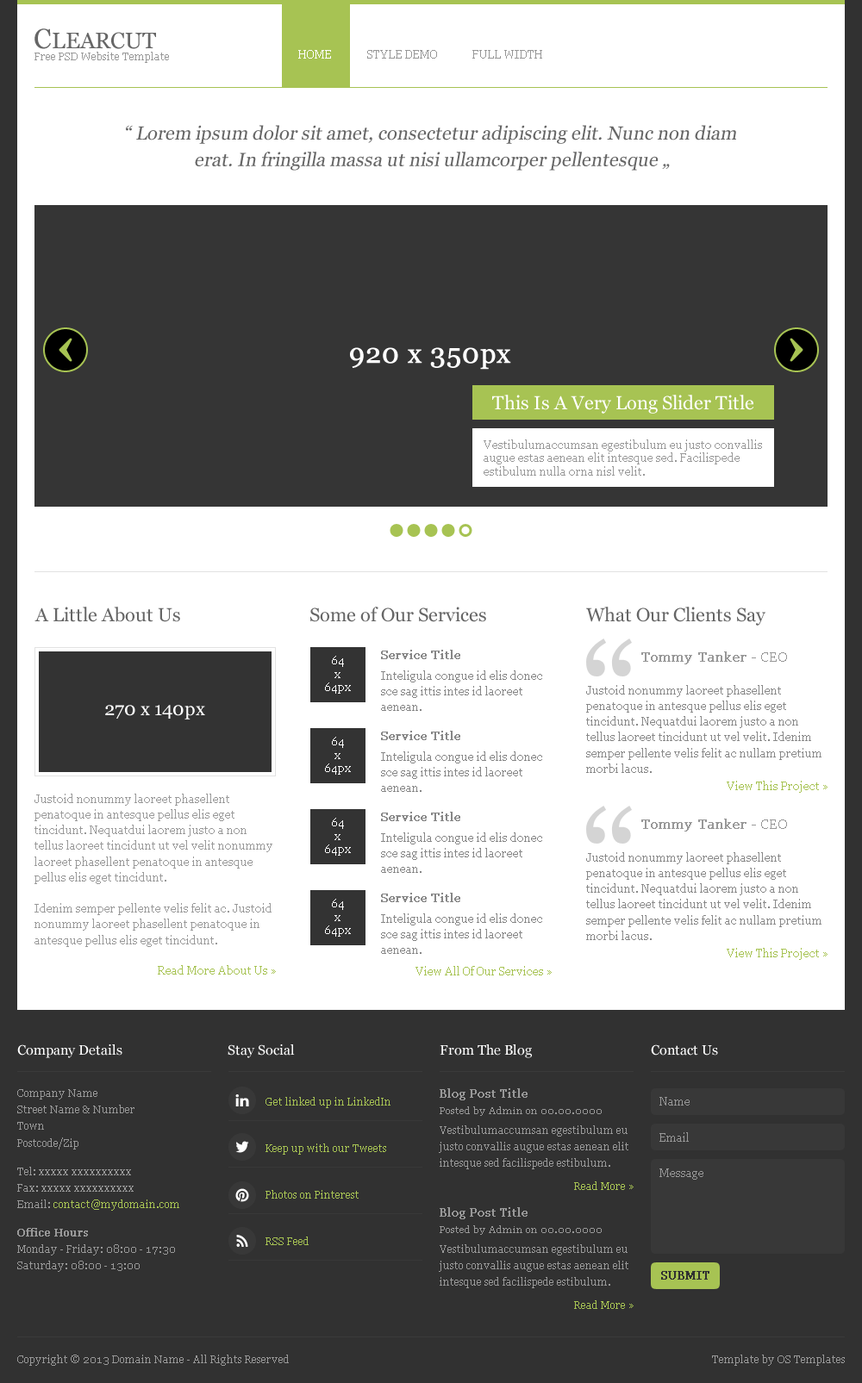
<style>
.page{position:relative;width:862px;height:1383px;background:#ffffff}
.page>*{position:absolute;margin:0}
.t1{font:22.4px "Georgia";color:#666666}
.t2{font:27.6px "Georgia";color:#666666}
.t3{font:10.3px "Georgia";color:#999999}
.t4{font:11.2px "Georgia";color:#ffffff}
.t5{font:11.2px "Georgia";color:#979797}
.t6{font:19px/26.5px "Georgia";color:#666666;font-style:italic}
.t7{font:27.6px "Georgia";color:#ffffff;font-weight:bold}
.t8{font:19px "Georgia";color:#ffffff}
.t9{font:11.2px/13.4px "Georgia";color:#999999}
.t10{font:19px "Georgia";color:#666666}
.t11{font:12.1px "Georgia";color:#878787;font-weight:bold}
.t12{font:13.8px "Georgia";color:#989898;font-weight:bold}
.t13{font:13.8px "Georgia";color:#989898}
.t14{font:11.2px/13.4px "Georgia";color:#ffffff}
.t15{font:11.2px/15.7px "Georgia";color:#868686}
.t16{font:11.2px/15.7px "Georgia";color:#888888}
.t17{font:11.2px "Georgia";color:#a7c353}
.t18{font:11.2px/15.7px "Georgia";color:#999999}
.t19{font:13.8px "Georgia";color:#ffffff}
.t20{font:10.3px/16.5px "Georgia";color:#999999}
.t21{font:10.3px "Georgia";color:#a7c353}
.t22{font:11.2px "Georgia";color:#999999;font-weight:bold}
.t23{font:11.2px "Georgia";color:#989898}
.t24{font:9.5px "Georgia";color:#999999}
.t25{font:10.3px/16.5px "Georgia";color:#a7c353}
.t26{font:10.3px/16.5px "Georgia";color:#999999;font-weight:bold}
.t27{font:11.2px "Georgia";color:#313131;font-weight:bold}
</style>
<div class="page">
<p class="t1" style="left:34px;top:28px;width:122px;height:21px"><span class="t2">C</span>LEARCUT</p>
<p class="t3" style="left:34px;top:52px;width:135px;height:11px">Free PSD Website Template</p>
<p class="t4" style="left:298px;top:50px;width:33px;height:9px">HOME</p>
<p class="t5" style="left:367px;top:50px;width:70px;height:9px">STYLE DEMO</p>
<p class="t5" style="left:472px;top:50px;width:70px;height:9px">FULL WIDTH</p>
<p class="t6" style="left:126px;top:125px;width:610px;height:46px;text-align:center">“ Lorem ipsum dolor sit amet, consectetur adipiscing elit. Nunc non diam <br>erat. In fringilla massa ut nisi ullamcorper pellentesque „</p>
<p class="t7" style="left:350px;top:347px;width:161px;height:23px">920 x 350px</p>
<p class="t8" style="left:492px;top:395px;width:262px;height:19px">This Is A Very Long Slider Title</p>
<p class="t9" style="left:484px;top:440px;width:278px;height:36px">Vestibulumaccumsan egestibulum eu justo convallis augue estas aenean elit intesque sed. Facilispede estibulum nulla orna nisl velit.</p>
<p class="t10" style="left:34px;top:607px;width:146px;height:15px">A Little About Us</p>
<p class="t10" style="left:310px;top:607px;width:176px;height:15px">Some of Our Services</p>
<p class="t10" style="left:586px;top:607px;width:179px;height:19px">What Our Clients Say</p>
<p class="t11" style="left:381px;top:650px;width:79px;height:9px">Service Title</p>
<p class="t12" style="left:641px;top:652px;width:146px;height:13px">Tommy Tanker<span class="t13"> - CEO</span></p>
<p class="t14" style="left:325px;top:656px;width:26px;height:38px;text-align:center">64<br>x<br>64px</p>
<p class="t15" style="left:381px;top:671px;width:161px;height:40px">Inteligula congue id elis donec sce sag ittis intes id laoreet aenean.</p>
<p class="t16" style="left:586px;top:685px;width:235px;height:88px">Justoid nonummy laoreet phasellent penatoque in antesque pellus elis eget tincidunt. Nequatdui laorem justo a non tellus laoreet tincidunt ut vel velit. Idenim semper pellente velis felit ac nullam pretium morbi lacus.</p>
<p class="t8" style="left:105px;top:705px;width:100px;height:15px">270 x 140px</p>
<p class="t14" style="left:325px;top:737px;width:26px;height:38px;text-align:center">64<br>x<br>64px</p>
<p class="t11" style="left:381px;top:731px;width:79px;height:9px">Service Title</p>
<p class="t15" style="left:381px;top:752px;width:161px;height:40px">Inteligula congue id elis donec sce sag ittis intes id laoreet aenean.</p>
<p class="t17" style="left:727px;top:781px;width:100px;height:12px">View This Project »</p>
<p class="t18" style="left:34px;top:794px;width:238px;height:153px">Justoid nonummy laoreet phasellent penatoque in antesque pellus elis eget tincidunt. Nequatdui laorem justo a non tellus laoreet tincidunt ut vel velit nonummy laoreet phasellent penatoque in antesque pellus elis eget tincidunt.<br><br>Idenim semper pellente velis felit ac. Justoid nonummy laoreet phasellent penatoque in antesque pellus elis eget tincidunt.</p>
<p class="t14" style="left:325px;top:818px;width:26px;height:38px;text-align:center">64<br>x<br>64px</p>
<p class="t11" style="left:381px;top:812px;width:79px;height:9px">Service Title</p>
<p class="t12" style="left:641px;top:819px;width:146px;height:13px">Tommy Tanker<span class="t13"> - CEO</span></p>
<p class="t15" style="left:381px;top:833px;width:161px;height:40px">Inteligula congue id elis donec sce sag ittis intes id laoreet aenean.</p>
<p class="t16" style="left:586px;top:852px;width:235px;height:88px">Justoid nonummy laoreet phasellent penatoque in antesque pellus elis eget tincidunt. Nequatdui laorem justo a non tellus laoreet tincidunt ut vel velit. Idenim semper pellente velis felit ac nullam pretium morbi lacus.</p>
<p class="t11" style="left:381px;top:893px;width:79px;height:9px">Service Title</p>
<p class="t14" style="left:325px;top:899px;width:26px;height:38px;text-align:center">64<br>x<br>64px</p>
<p class="t15" style="left:381px;top:914px;width:161px;height:40px">Inteligula congue id elis donec sce sag ittis intes id laoreet aenean.</p>
<p class="t17" style="left:727px;top:948px;width:100px;height:12px">View This Project »</p>
<p class="t17" style="left:158px;top:965px;width:118px;height:10px">Read More About Us »</p>
<p class="t17" style="left:415px;top:966px;width:137px;height:10px">View All Of Our Services »</p>
<p class="t19" style="left:17px;top:1045px;width:105px;height:13px">Company Details</p>
<p class="t19" style="left:228px;top:1045px;width:67px;height:13px">Stay Social</p>
<p class="t19" style="left:440px;top:1045px;width:92px;height:13px">From The Blog</p>
<p class="t19" style="left:651px;top:1045px;width:67px;height:11px">Contact Us</p>
<p class="t20" style="left:17px;top:1089px;width:117px;height:61px">Company Name<br>Street Name &amp; Number<br>Town<br>Postcode/Zip</p>
<p class="t21" style="left:265px;top:1097px;width:125px;height:11px">Get linked up in LinkedIn</p>
<p class="t22" style="left:440px;top:1089px;width:88px;height:12px">Blog Post Title</p>
<p class="t23" style="left:659px;top:1097px;width:31px;height:9px">Name</p>
<p class="t24" style="left:440px;top:1107px;width:162px;height:9px">Posted by Admin on 00.00.0000</p>
<p class="t20" style="left:439px;top:1126px;width:189px;height:44px">Vestibulumaccumsan egestibulum eu justo convallis augue estas aenean elit intesque sed facilispede estibulum.</p>
<p class="t23" style="left:659px;top:1133px;width:30px;height:9px">Email</p>
<p class="t21" style="left:265px;top:1144px;width:121px;height:11px">Keep up with our Tweets</p>
<p class="t20" style="left:17px;top:1167px;width:162px;height:44px">Tel: xxxxx xxxxxxxxxx<br>Fax: xxxxx xxxxxxxxxx<br>Email: <span class="t25">contact@mydomain.com</span></p>
<p class="t23" style="left:659px;top:1169px;width:44px;height:11px">Message</p>
<p class="t21" style="left:574px;top:1182px;width:60px;height:8px">Read More »</p>
<p class="t21" style="left:265px;top:1190px;width:94px;height:9px">Photos on Pinterest</p>
<p class="t22" style="left:440px;top:1208px;width:88px;height:12px">Blog Post Title</p>
<p class="t20" style="left:17px;top:1228px;width:158px;height:44px"><span class="t26">Office Hours<br></span>Monday - Friday: 08:00 - 17:30<br>Saturday: 08:00 - 13:00</p>
<p class="t24" style="left:440px;top:1226px;width:162px;height:9px">Posted by Admin on 00.00.0000</p>
<p class="t21" style="left:265px;top:1237px;width:44px;height:9px">RSS Feed</p>
<p class="t20" style="left:439px;top:1245px;width:189px;height:44px">Vestibulumaccumsan egestibulum eu justo convallis augue estas aenean elit intesque sed facilispede estibulum.</p>
<p class="t27" style="left:661px;top:1271px;width:48px;height:9px">SUBMIT</p>
<p class="t21" style="left:574px;top:1301px;width:60px;height:8px">Read More »</p>
<p class="t3" style="left:17px;top:1355px;width:272px;height:11px">Copyright © 2013 Domain Name - All Rights Reserved</p>
<p class="t3" style="left:712px;top:1355px;width:133px;height:11px">Template by OS Templates</p>
</div>
